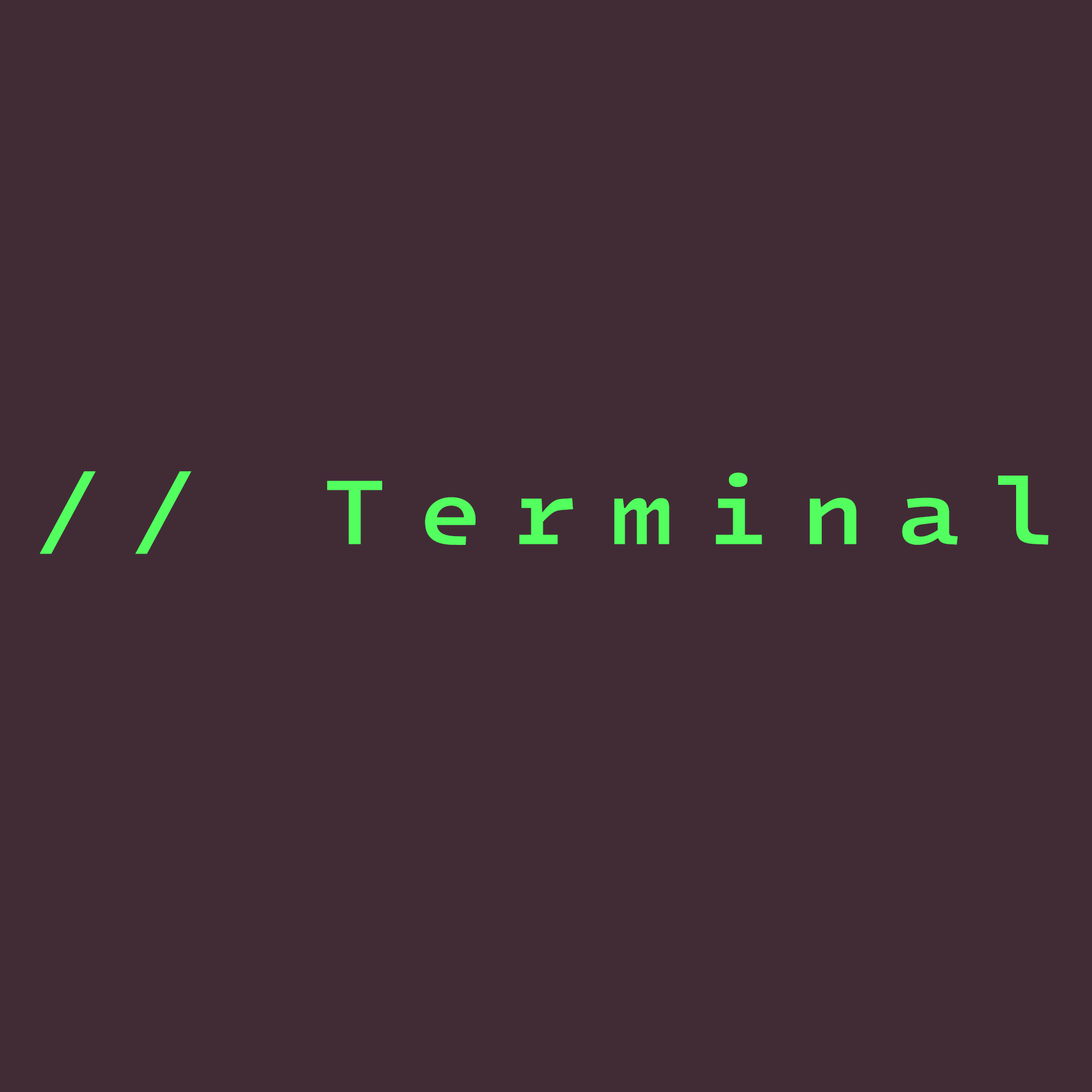
<style>
.page{position:relative;width:1092px;height:1092px;background:#412c36}
.page>*{position:absolute;margin:0}
.t1{font:96.3px "IntelOneMono-Medium";letter-spacing:0.3em;color:#53ff5f;scale:1.09 1}
</style>
<div class="page">
<p class="t1" style="left:40px;top:471px;width:1009px;height:83px">// Terminal</p>
</div>
